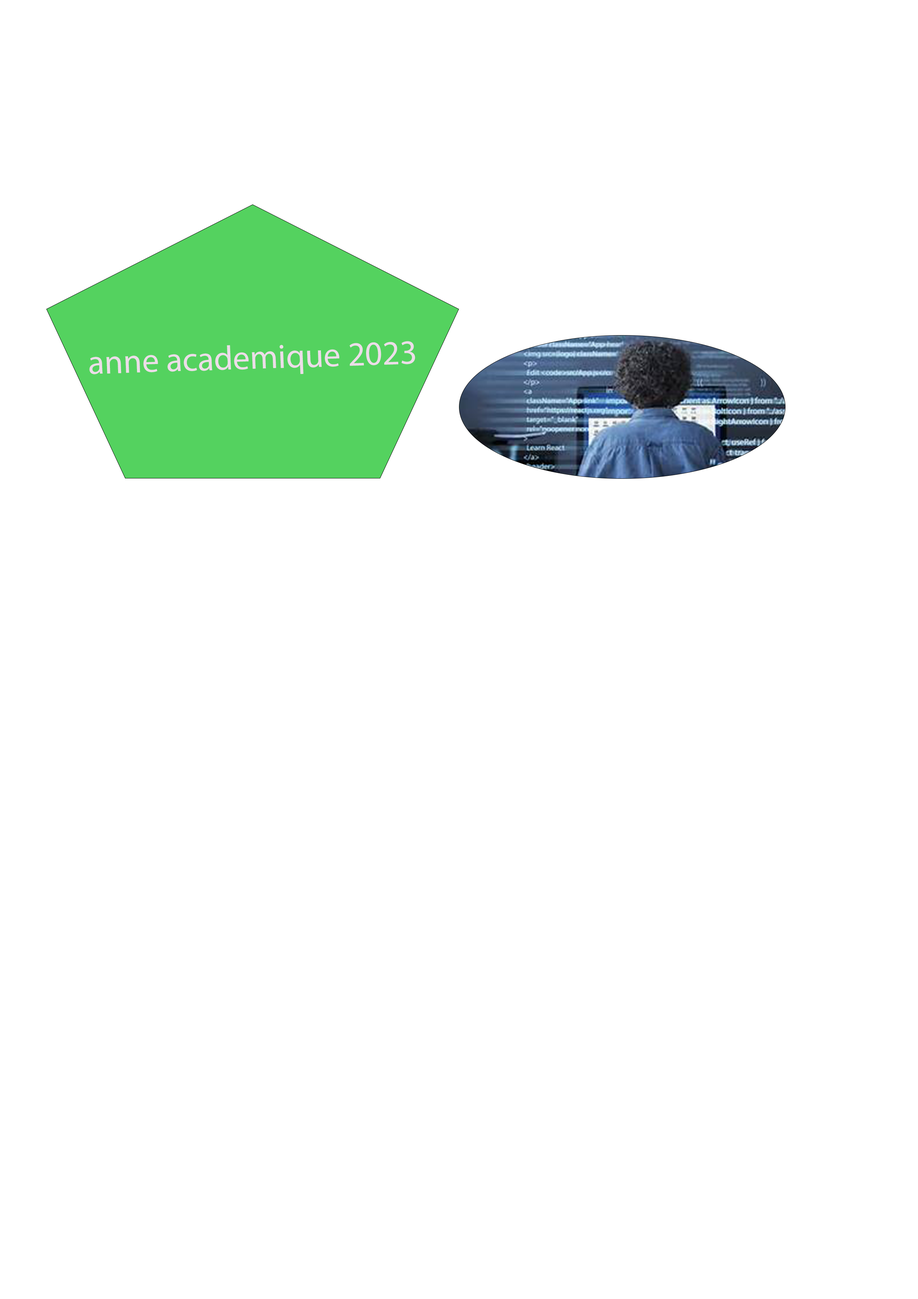
<style>
.page{position:relative;width:918px;height:1299px;background:#ffffff}
.page>*{position:absolute;margin:0}
.t1{font:34.1px "MyriadPro-Regular";color:#ecdde8}
</style>
<div class="page">
<p class="t1" style="left:89px;top:341px;width:326px;height:33px;rotate:-2deg">anne academique 2023</p>
</div>
